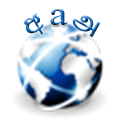
<style>
.page{position:relative;width:120px;height:120px;background:#ffffff}
.page>*{position:absolute;margin:0}
.t1{font:29.3px "sandaru-n";font-weight:bold}
.t2{font:36.4px "TimesNewRomanPSMT";scale:1.14 1}
.t3{font:30.6px "Bamini-Regular";font-weight:bold}
</style>
<div class="page">
<p class="t1" style="left:24px;top:13px;width:20px;height:22px;rotate:-30deg">w</p>
<p class="t2" style="left:50px;top:9px;width:18px;height:16px">a</p>
<p class="t3" style="left:72px;top:15px;width:28px;height:22px;rotate:30deg">m</p>
</div>
